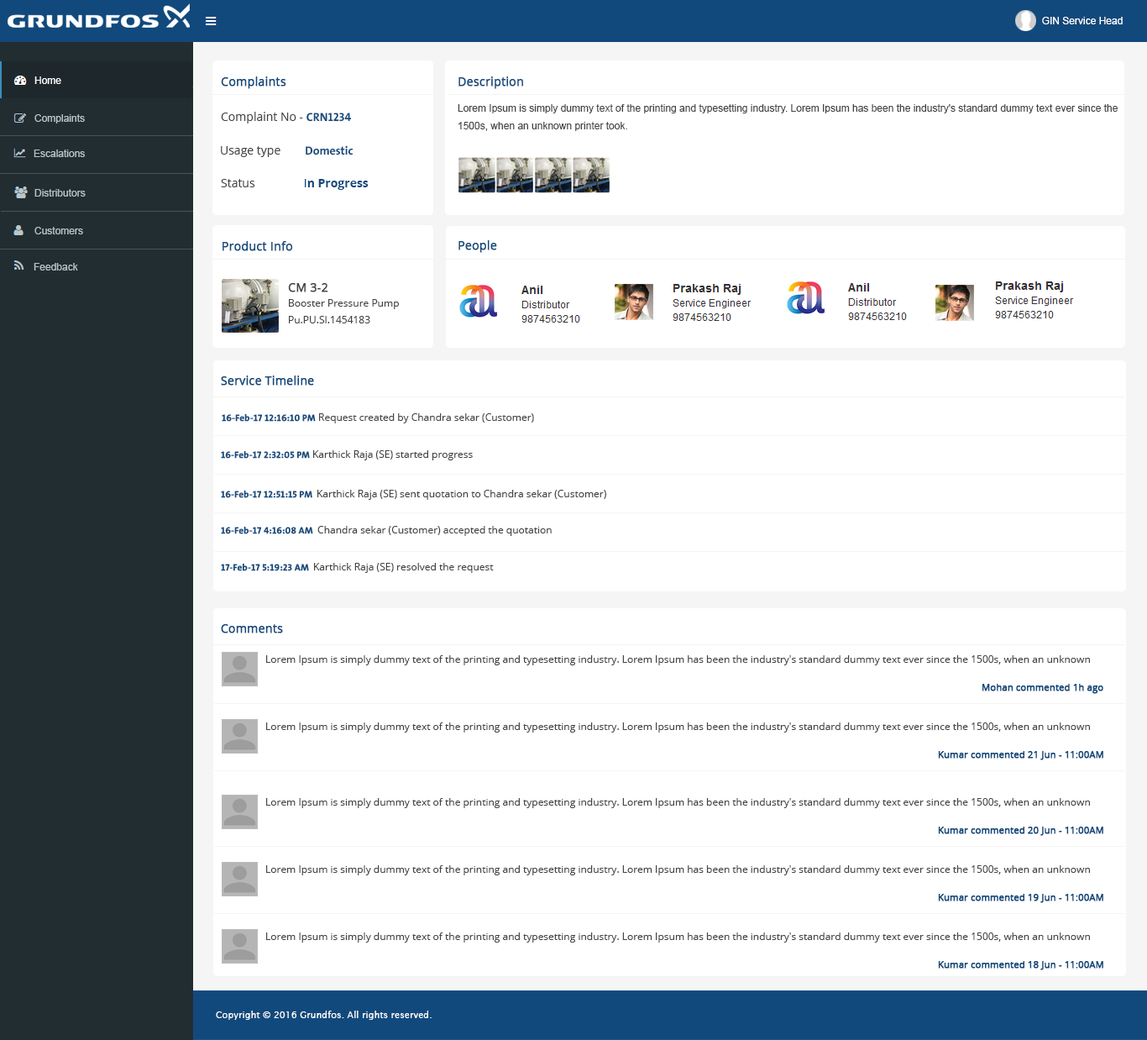
<style>
.page{position:relative;width:1147px;height:1040px;background:#ffffff}
.page>*{position:absolute;margin:0}
.t1{font:10.1px "ArialMT";color:#fffefd}
.t2{font:10.1px "ArialMT";color:#ffffff}
.t3{font:11.8px "OpenSans";color:#11497c;font-weight:bold}
.t4{font:11.8px "OpenSans"}
.t5{font:11.8px "OpenSans";color:#444444}
.t6{font:11.8px "GrundfosTheSansOT-7B";color:#11497c}
.t7{font:10.1px/17.6px "ArialMT";color:#444444}
.t8{font:10.1px "ArialMT";color:#b8c4c6}
.t9{font:11.8px "OpenSans-Bold";color:#11497c}
.t10{font:11.8px "OpenSans";color:#11497c}
.t11{font:11.8px "OpenSans";color:#444444;font-weight:bold}
.t12{font:10.1px "OpenSans";color:#444444}
.t13{font:9.2px "GrundfosTheSansOT-7B";color:#11497c;font-weight:bold}
.t14{font:9.2px "OpenSans";color:#11497c;font-weight:bold}
.t15{font:9.2px "LucidaSans";color:#fdffff}
</style>
<div class="page">
<p class="t1" style="left:1042px;top:17px;width:81px;height:7px">GIN Service Head</p>
<p class="t2" style="left:34px;top:76px;width:27px;height:8px">Home</p>
<p class="t3" style="left:221px;top:76px;width:65px;height:13px">Complaints</p>
<p class="t4" style="left:458px;top:76px;width:62px;height:12px">Description</p>
<p class="t3" style="left:458px;top:76px;width:65px;height:13px">Description</p>
<p class="t5" style="left:221px;top:112px;width:131px;height:11px">Complaint No - <span class="t6">CRN1234</span></p>
<p class="t7" style="left:458px;top:104px;width:660px;height:27px">Lorem Ipsum is simply dummy text of the printing and typesetting industry. Lorem Ipsum has been the industry's standard dummy text ever since the <br>1500s, when an unknown printer took.</p>
<p class="t8" style="left:34px;top:114px;width:51px;height:9px">Complaints</p>
<p class="t8" style="left:34px;top:149px;width:51px;height:8px">Escalations</p>
<p class="t5" style="left:221px;top:145px;width:133px;height:12px">Usage type        <span class="t6">Domestic</span></p>
<p class="t9" style="left:221px;top:179px;width:148px;height:11px"><span class="t5"><br>Status                </span><span class="t10">I</span>n Progress</p>
<p class="t8" style="left:34px;top:189px;width:52px;height:7px">Distributors</p>
<p class="t8" style="left:34px;top:227px;width:49px;height:7px">Customers</p>
<p class="t3" style="left:223px;top:241px;width:70px;height:10px"><span class="t10"> </span>Product Info</p>
<p class="t3" style="left:458px;top:240px;width:39px;height:13px">People</p>
<p class="t8" style="left:34px;top:263px;width:44px;height:7px">Feedback</p>
<p class="t11" style="left:288px;top:283px;width:40px;height:9px">CM 3-2</p>
<p class="t12" style="left:289px;top:299px;width:110px;height:10px">Booster Pressure Pump</p>
<p class="t12" style="left:289px;top:316px;width:81px;height:7px">Pu.PU.SI.1454183</p>
<p class="t3" style="left:221px;top:375px;width:93px;height:10px"><span class="t10"> </span>Service Timeline</p>
<p class="t13" style="left:222px;top:413px;width:94px;height:9px">16-Feb-17 12:16:10 PM</p>
<p class="t12" style="left:319px;top:413px;width:215px;height:10px">Request created by Chandra sekar (Customer)</p>
<p class="t13" style="left:221px;top:450px;width:89px;height:8px">16-Feb-17 2:32:05 PM</p>
<p class="t12" style="left:313px;top:450px;width:160px;height:10px">Karthick Raja (SE) started progress</p>
<p class="t13" style="left:221px;top:490px;width:91px;height:8px">16-Feb-17 12:51:15 PM</p>
<p class="t12" style="left:317px;top:490px;width:289px;height:10px">Karthick Raja (SE) sent quotation to Chandra sekar (Customer)</p>
<p class="t13" style="left:221px;top:526px;width:92px;height:8px">16-Feb-17 4:16:08 AM</p>
<p class="t12" style="left:317px;top:526px;width:235px;height:10px">Chandra sekar (Customer) accepted the quotation</p>
<p class="t13" style="left:221px;top:563px;width:88px;height:8px">17-Feb-17 5:19:23 AM</p>
<p class="t12" style="left:314px;top:563px;width:180px;height:10px">Karthick Raja (SE) resolved the request</p>
<p class="t3" style="left:221px;top:624px;width:62px;height:9px"><span class="t10"> </span>Comments</p>
<p class="t12" style="left:266px;top:655px;width:824px;height:10px">Lorem Ipsum is simply dummy text of the printing and typesetting industry. Lorem Ipsum has been the industry's standard dummy text ever since the 1500s, when an unknown</p>
<p class="t14" style="left:982px;top:684px;width:121px;height:10px">Mohan commented 1h ago</p>
<p class="t12" style="left:266px;top:722px;width:824px;height:10px">Lorem Ipsum is simply dummy text of the printing and typesetting industry. Lorem Ipsum has been the industry's standard dummy text ever since the 1500s, when an unknown</p>
<p class="t14" style="left:938px;top:751px;width:165px;height:9px">Kumar commented 21 Jun - 11:00AM</p>
<p class="t12" style="left:266px;top:798px;width:824px;height:10px">Lorem Ipsum is simply dummy text of the printing and typesetting industry. Lorem Ipsum has been the industry's standard dummy text ever since the 1500s, when an unknown</p>
<p class="t14" style="left:938px;top:826px;width:165px;height:10px">Kumar commented 20 Jun - 11:00AM</p>
<p class="t12" style="left:266px;top:865px;width:824px;height:10px">Lorem Ipsum is simply dummy text of the printing and typesetting industry. Lorem Ipsum has been the industry's standard dummy text ever since the 1500s, when an unknown</p>
<p class="t14" style="left:938px;top:893px;width:165px;height:10px">Kumar commented 19 Jun - 11:00AM</p>
<p class="t12" style="left:266px;top:932px;width:824px;height:10px">Lorem Ipsum is simply dummy text of the printing and typesetting industry. Lorem Ipsum has been the industry's standard dummy text ever since the 1500s, when an unknown</p>
<p class="t14" style="left:938px;top:961px;width:165px;height:9px">Kumar commented 18 Jun - 11:00AM</p>
<p class="t15" style="left:216px;top:1010px;width:216px;height:9px">Copyright © 2016 Grundfos. All rights reserved.</p>
</div>
